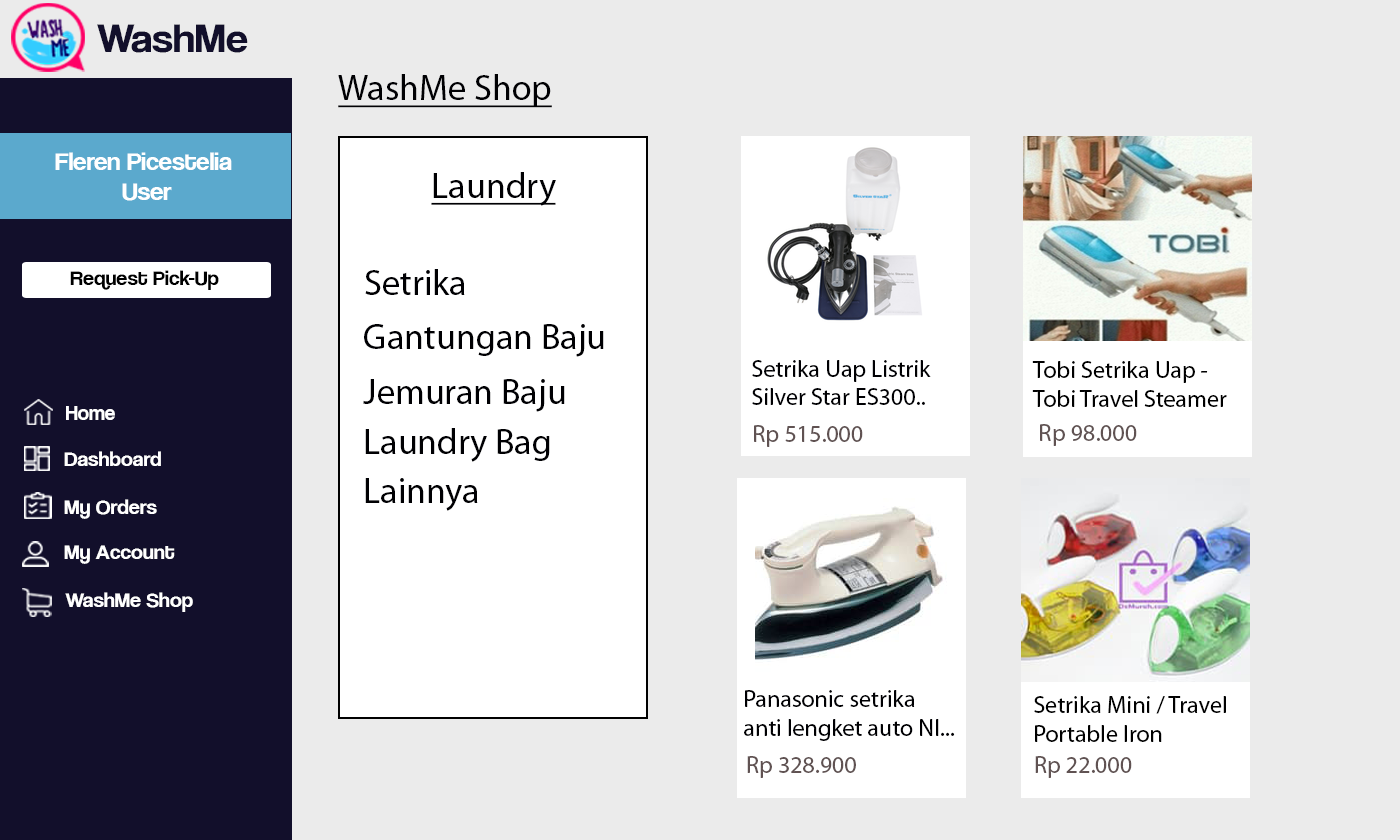
<style>
.page{position:relative;width:1400px;height:840px;background:#ebebeb}
.page>*{position:absolute;margin:0}
.t1{font:42.1px "CoolveticaRg-Regular";color:#120f2b;scale:1.05 1}
.t2{font:36px "MyriadPro-Regular";color:#000003;text-decoration:underline}
.t3{font:25.2px "CoolveticaRg-Regular";color:#ffffff;scale:1.05 1}
.t4{font:21px "CoolveticaRg-Regular";color:#000000;scale:1.05 1}
.t5{font:36px "MyriadPro-Regular";color:#000003}
.t6{font:24px "MyriadPro-Regular";color:#000003}
.t7{font:24px "MyriadPro-Regular";color:#000000}
.t8{font:21px "CoolveticaRg-Regular";color:#ffffff}
.t9{font:24px "MyriadPro-Regular";color:#605252}
.t10{font:21px "CoolveticaRg-Regular";color:#ffffff;scale:1.05 1}
</style>
<div class="page">
<p class="t1" style="left:97px;top:24px;width:151px;height:29px">WashMe</p>
<p class="t2" style="left:338px;top:74px;width:214px;height:34px">WashMe Shop</p>
<p class="t3" style="left:55px;top:152px;width:177px;height:49px;text-align:center">Fleren Picestelia<br> User</p>
<p class="t2" style="left:431px;top:172px;width:125px;height:34px">Laundry</p>
<p class="t4" style="left:70px;top:270px;width:149px;height:20px">Request Pick-Up</p>
<p class="t5" style="left:365px;top:269px;width:100px;height:26px">Setrika</p>
<p class="t5" style="left:364px;top:324px;width:240px;height:33px">Gantungan Baju</p>
<p class="t6" style="left:752px;top:360px;width:179px;height:45px">Setrika Uap Listrik<br>Silver Star ES300..</p>
<p class="t7" style="left:1032px;top:361px;width:195px;height:46px">Tobi Setrika Uap - <br>Tobi Travel Steamer</p>
<p class="t5" style="left:363px;top:379px;width:202px;height:33px">Jemuran Baju</p>
<p class="t8" style="left:66px;top:406px;width:49px;height:14px">Home</p>
<p class="t9" style="left:754px;top:425px;width:109px;height:22px">Rp 515.000</p>
<p class="t9" style="left:1040px;top:424px;width:97px;height:22px">Rp 98.000</p>
<p class="t5" style="left:365px;top:428px;width:185px;height:34px">Laundry Bag</p>
<p class="t10" style="left:64px;top:451px;width:97px;height:15px">Dashboard</p>
<p class="t5" style="left:365px;top:478px;width:113px;height:33px">Lainnya</p>
<p class="t10" style="left:64px;top:499px;width:93px;height:20px">My Orders</p>
<p class="t10" style="left:64px;top:545px;width:111px;height:19px">My Account</p>
<p class="t10" style="left:65px;top:592px;width:128px;height:20px">WashMe Shop</p>
<p class="t6" style="left:744px;top:690px;width:211px;height:51px">Panasonic setrika <br>anti lengket auto NI...</p>
<p class="t7" style="left:1034px;top:696px;width:192px;height:46px">Setrika Mini / Travel<br>Portable Iron</p>
<p class="t9" style="left:747px;top:756px;width:109px;height:22px">Rp 328.900</p>
<p class="t9" style="left:1035px;top:756px;width:97px;height:22px">Rp 22.000</p>
</div>
